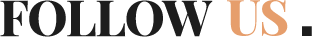
<style>
.page{position:relative;width:312px;height:37px;background:#ffffff}
.page>*{position:absolute;margin:0}
.t1{font:50px "PlayfairDisplay-ExtraBold";letter-spacing:-0.03em;color:#1d1d1d}
.t2{font:50px "PlayfairDisplay-ExtraBold";letter-spacing:-0.03em;color:#e69e6c}
</style>
<div class="page">
<p class="t1" style="left:0px;top:0px;width:213px;height:37px">FOLLOW</p>
<p class="t2" style="left:227px;top:0px;width:61px;height:36px">US</p>
</div>
